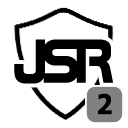
<style>
.page{position:relative;width:128px;height:128px;background:#ffffff}
.page>*{position:absolute;margin:0}
.t1{font:61.6px "SpaceBT-Bold";letter-spacing:-0.12em;color:#000000;font-weight:bold;scale:0.92 1}
.t2{font:27.3px "Tahoma-Bold";letter-spacing:-0.12em;color:#000000;font-weight:bold;scale:0.92 1}
</style>
<div class="page">
<p class="t1" style="left:14px;top:39px;width:99px;height:45px">JSR</p>
<p class="t2" style="left:98px;top:93px;width:14px;height:22px">2</p>
</div>
